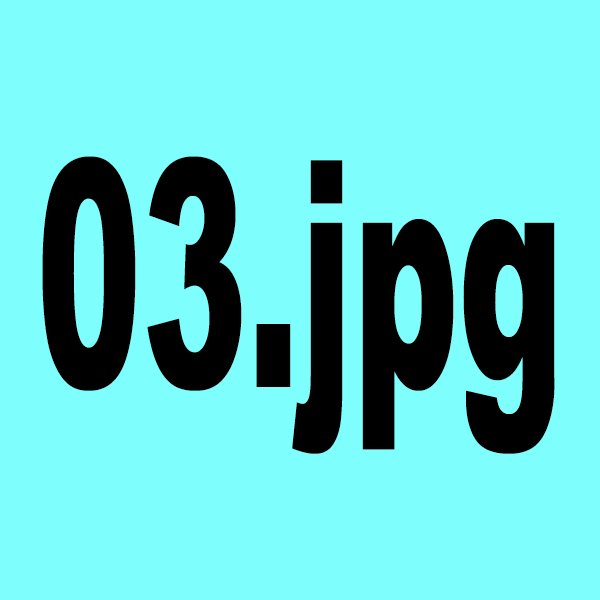
<style>
.page{position:relative;width:600px;height:600px;background:#7efffd}
.page>*{position:absolute;margin:0}
.t1{font:316.8px "Arial-Black";color:#000000;scale:0.5 1}
</style>
<div class="page">
<p class="t1" style="left:42px;top:156px;width:513px;height:298px">03.jpg</p>
</div>
